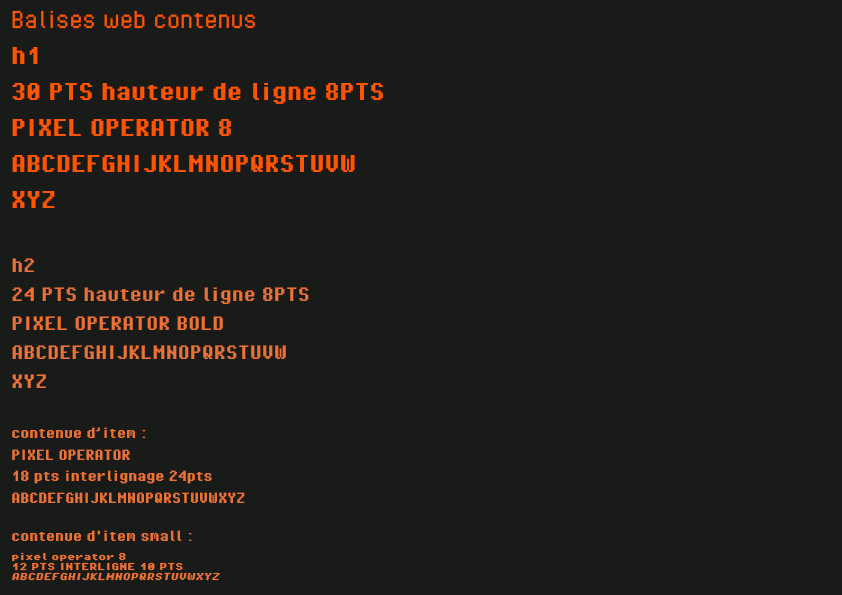
<style>
.page{position:relative;width:842px;height:595px;background:#191b18}
.page>*{position:absolute;margin:0}
.t1{font:18px "PixelOperator-Bold";color:#ea7235}
.t2{font:30px "PixelOperator";color:#ff5500}
.t3{font:30px "PixelOperator-Bold";color:#ff5500}
.t4{font:24px "PixelOperator-Bold";color:#ea7235}
.t5{font:8px "PixelOperator8-Bold";color:#ea7235}
.t6{font:8px "PixelOperator8-Bold";color:#ea7235;font-style:italic}
</style>
<div class="page">
<p class="t1" style="left:12px;top:10px;width:371px;height:571px"><span class="t2">Balises web contenus<br></span><span class="t3">h1<br>30 PTS hauteur de ligne 8PTS<br>PIXEL OPERATOR 8 <br>ABCDEFGHIJKLMNOPQRSTUVW<br>XYZ<br><br></span><span class="t4">h2<br>24 PTS hauteur de ligne 8PTS<br>PIXEL OPERATOR BOLD<br>ABCDEFGHIJKLMNOPQRSTUVW<br>XYZ<br><br></span>contenue d’item :<br>PIXEL OPERATOR  <br>18 pts interlignage 24pts<br>ABCDEFGHIJKLMNOPQRSTUVWXYZ                  <br><br>contenue d'item small :<br><br><span class="t5">pixel operator 8<br>12 PTS INTERLIGNE 10 PTS</span><span class="t6"><br>ABCDEFGHIJKLMNOPQRSTUVWXYZ</span></p>
</div>
